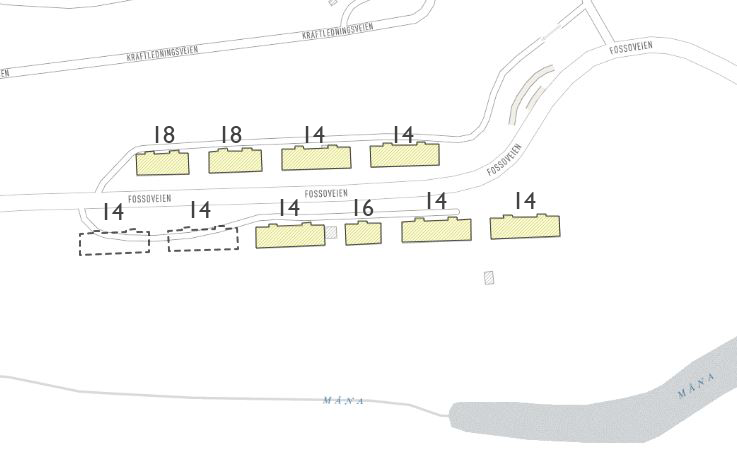
<style>
.page{position:relative;width:737px;height:463px;background:#ffffff}
.page>*{position:absolute;margin:0}
.t1{font:24px "GillSansMT";color:#434343}
</style>
<div class="page">
<p class="t1" style="left:155px;top:126px;width:20px;height:17px">18</p>
<p class="t1" style="left:222px;top:126px;width:20px;height:17px">18</p>
<p class="t1" style="left:305px;top:126px;width:20px;height:17px">14</p>
<p class="t1" style="left:394px;top:126px;width:20px;height:17px">14</p>
<p class="t1" style="left:427px;top:192px;width:20px;height:17px">14</p>
<p class="t1" style="left:516px;top:192px;width:20px;height:17px">14</p>
<p class="t1" style="left:104px;top:203px;width:20px;height:17px">14</p>
<p class="t1" style="left:191px;top:201px;width:20px;height:17px">14</p>
<p class="t1" style="left:280px;top:199px;width:20px;height:17px">14</p>
<p class="t1" style="left:354px;top:199px;width:20px;height:17px">16</p>
</div>
